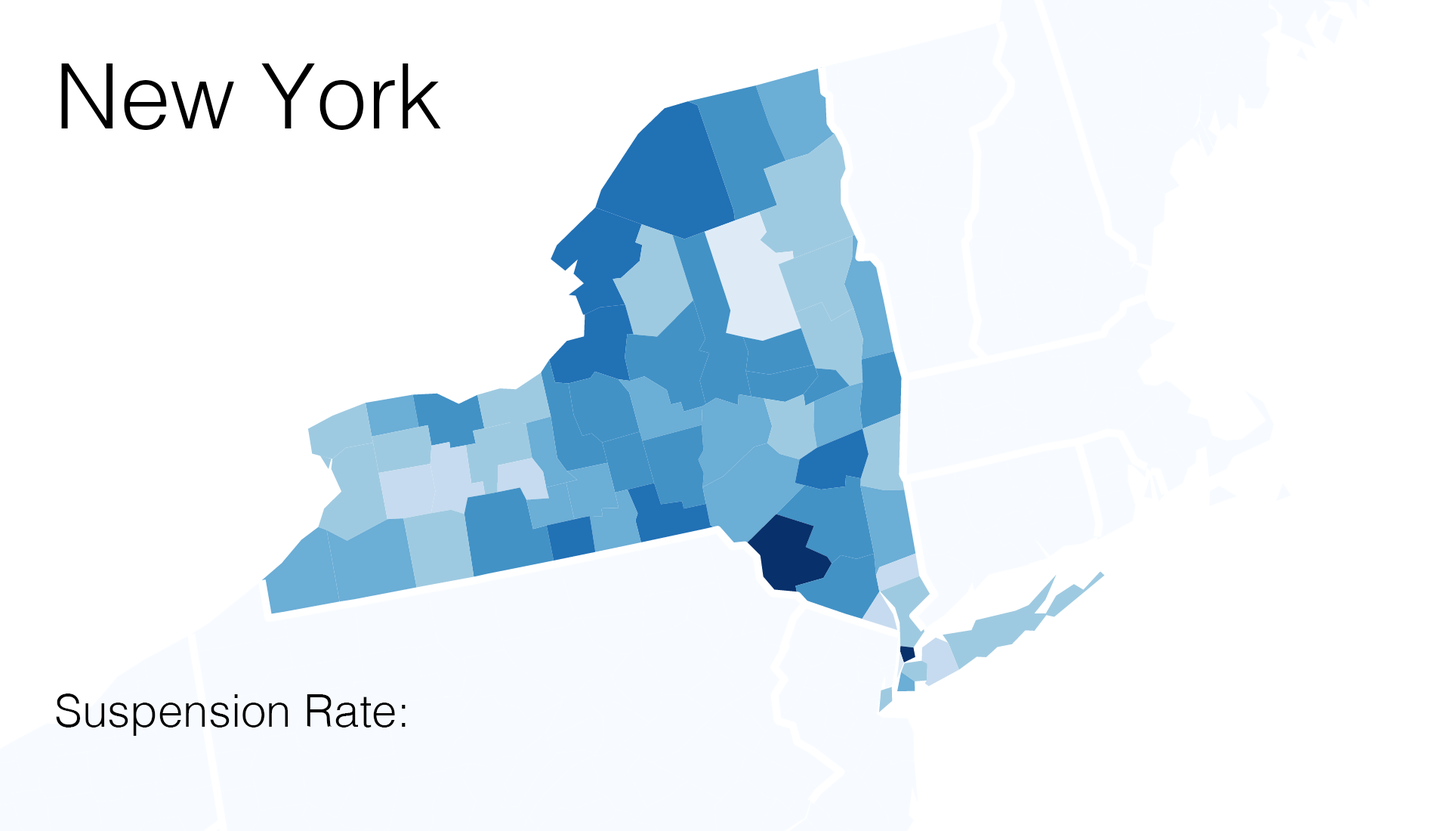
<style>
.page{position:relative;width:1435px;height:831px;background:#ffffff}
.page>*{position:absolute;margin:0}
.t1{font:45.3px "Helvetica-Light";color:#000000}
.t2{font:90.6px "Helvetica-Light";color:#000000}
</style>
<div class="page">
<p class="t1" style="left:56px;top:63px;width:385px;height:673px"><span class="t2">New York<br><br><br><br><br></span><br><br>Suspension Rate:</p>
<p class="t1" style="left:57px;top:63px;width:553px;height:664px"><span class="t2">New York<br><br><br><br><br></span><br><br>Median Household Income:</p>
</div>
